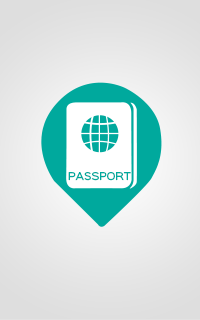
<style>
.page{position:relative;width:200px;height:320px}
.page>*{position:absolute;margin:0}
.t1{font:9.7px "SinkinSans-500Medium";color:#00a99d}
</style>
<div class="page">
<p class="t1" style="left:68px;top:172px;width:63px;height:9px">PASSPORT</p>
</div>
